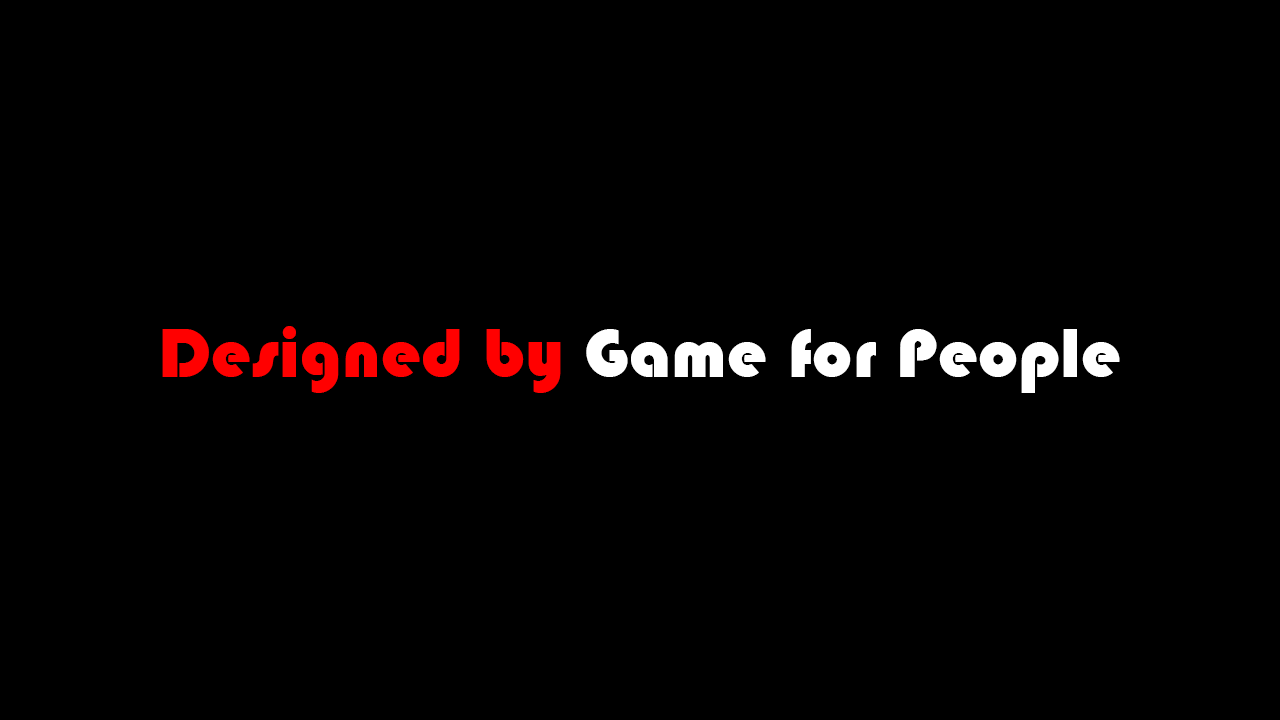
<style>
.page{position:relative;width:1280px;height:720px;background:#000000}
.page>*{position:absolute;margin:0}
.t1{font:72px "BlippoBlack";color:#ffffff}
.t2{font:72px "BlippoBlack";color:#ff0000}
</style>
<div class="page">
<p class="t1" style="left:162px;top:326px;width:958px;height:67px"><span class="t2">Designed by </span>Game for People</p>
</div>
